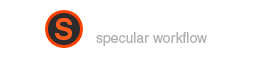
<style>
.page{position:relative;width:253px;height:57px;background:#ffffff}
.page>*{position:absolute;margin:0}
.t1{font:29.3px "Helvetica-Bold";color:#fe5d1e}
.t2{font:14px "Helvetica";color:#b0b0b0}
</style>
<div class="page">
<p class="t1" style="left:55px;top:18px;width:17px;height:22px">S</p>
<p class="t2" style="left:96px;top:32px;width:111px;height:14px">specular workflow</p>
</div>
